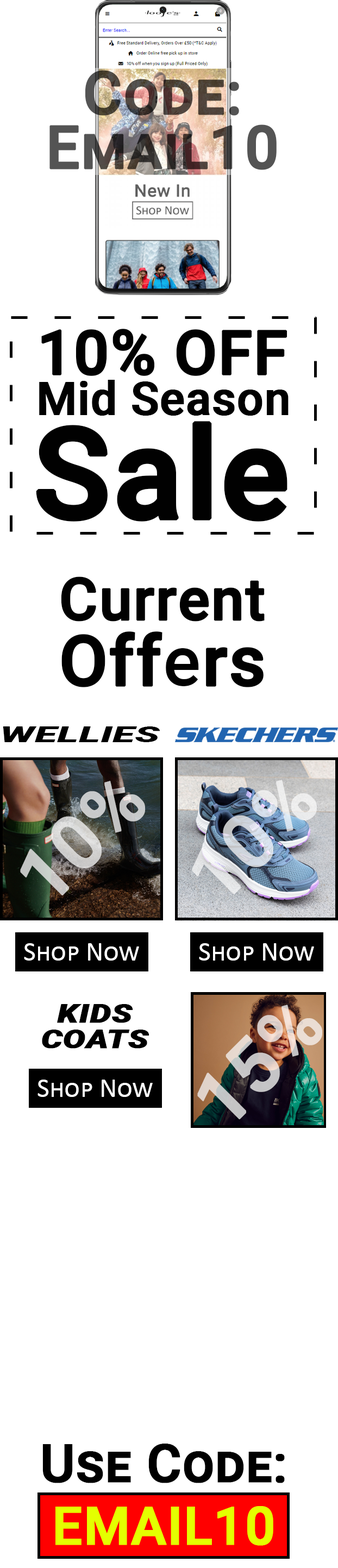
<style>
.page{position:relative;width:338px;height:1568px;background:#ffffff}
.page>*{position:absolute;margin:0}
.t1{font:59.4px/54.3px "Roboto-Medium";color:#504640;font-variant:small-caps;font-weight:bold}
.t2{font:46px/40.3px "Roboto-Medium";color:#010101;font-weight:bold}
.t3{font:61.4px "Roboto-Medium";color:#010101;font-weight:bold}
.t4{font:126.6px/103.6px "Roboto-Medium";color:#010101;font-weight:bold}
.t5{font:58.9px/47.5px "Roboto-Medium";color:#010101;font-weight:bold}
.t6{font:70.2px/65.7px "Roboto-Medium";color:#010101;font-weight:bold}
.t7{font:22.2px "Roboto-BlackItalic";color:#000000;text-transform:uppercase;scale:1.84 1}
.t8{font:75px "Roboto-Medium";color:#c9caca;font-weight:bold}
.t9{font:75px "Roboto-Medium";color:#dbe1e8;font-weight:bold}
.t10{font:27.2px "Calibri";color:#ffffff;font-variant:small-caps}
.t11{font:25.7px/25.7px "Roboto-BlackItalic";color:#000000;text-transform:uppercase;font-weight:bold;scale:1.29 1}
.t12{font:75px "Roboto-Medium";font-weight:bold}
.t13{font:52.6px/62.4px "Roboto-Medium";color:#000000;font-variant:small-caps;font-weight:bold}
.t14{font:52.6px/62.4px "Roboto-Medium";color:#e4ff00;font-variant:small-caps;font-weight:bold}
</style>
<div class="page">
<p class="t1" style="left:49px;top:70px;width:228px;height:100px;text-align:center">Code:<br>Email10</p>
<p class="t2" style="left:36px;top:329px;width:252px;height:193px;text-align:center"><span class="t3">10% OFF<br></span>Mid Season<br><span class="t4">Sale</span></p>
<p class="t5" style="left:61px;top:576px;width:204px;height:111px;text-align:center">Current<br><span class="t6">Offers</span></p>
<p class="t7" style="left:3px;top:726px;width:157px;height:16px">Wellies</p>
<p class="t8" style="left:20px;top:781px;width:125px;height:114px;rotate:-45deg">10%</p>
<p class="t9" style="left:192px;top:780px;width:125px;height:114px;rotate:-45deg">10%</p>
<p class="t10" style="left:24px;top:943px;width:115px;height:18px">Shop Now</p>
<p class="t10" style="left:199px;top:943px;width:115px;height:18px">Shop Now</p>
<p class="t11" style="left:42px;top:1004px;width:107px;height:45px;text-align:center">Kids<br>Coats</p>
<p class="t12" style="left:197px;top:1005px;width:125px;height:114px;rotate:-45deg">15%</p>
<p class="t10" style="left:37px;top:1080px;width:116px;height:17px">Shop Now</p>
<p class="t13" style="left:42px;top:1444px;width:243px;height:102px;text-align:center">Use Code:<br><span class="t14">EMAIL10</span></p>
</div>
